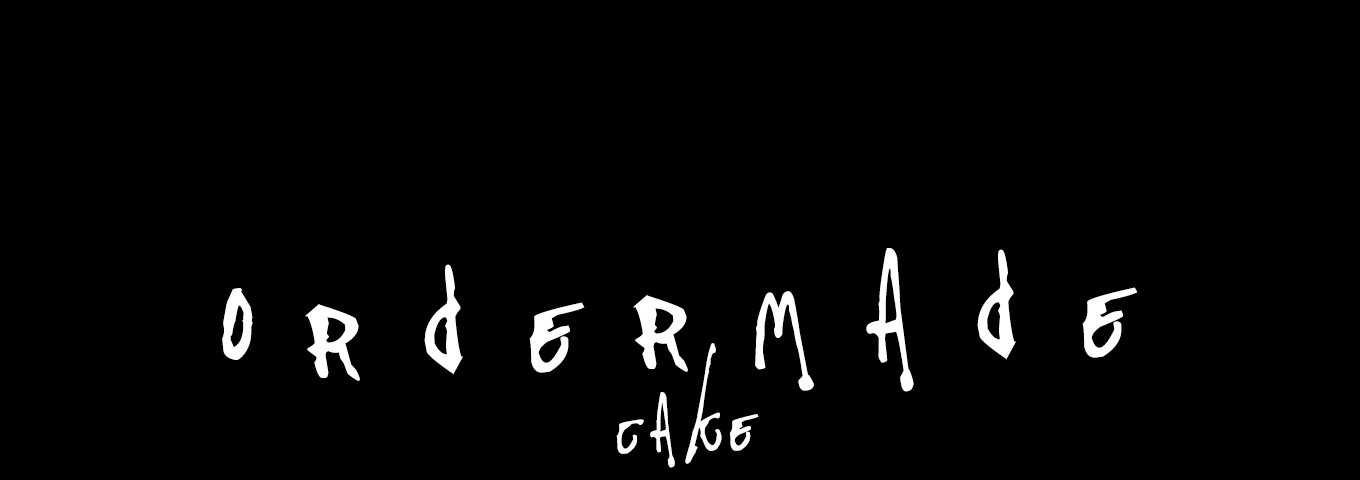
<style>
.page{position:relative;width:1360px;height:480px;background:#000000}
.page>*{position:absolute;margin:0}
.t1{font:340.5px "Pappo'sBluesBandOfficialFont";letter-spacing:0.15em;color:#ffffff;scale:1.12 1}
.t2{font:178.6px "Pappo'sBluesBandOfficialFont";letter-spacing:0.024em;color:#ffffff;scale:1.12 1}
</style>
<div class="page">
<p class="t1" style="left:222px;top:248px;width:916px;height:144px;rotate:-2deg">ordermade</p>
<p class="t2" style="left:616px;top:343px;width:143px;height:125px;rotate:-2deg">cake</p>
</div>
